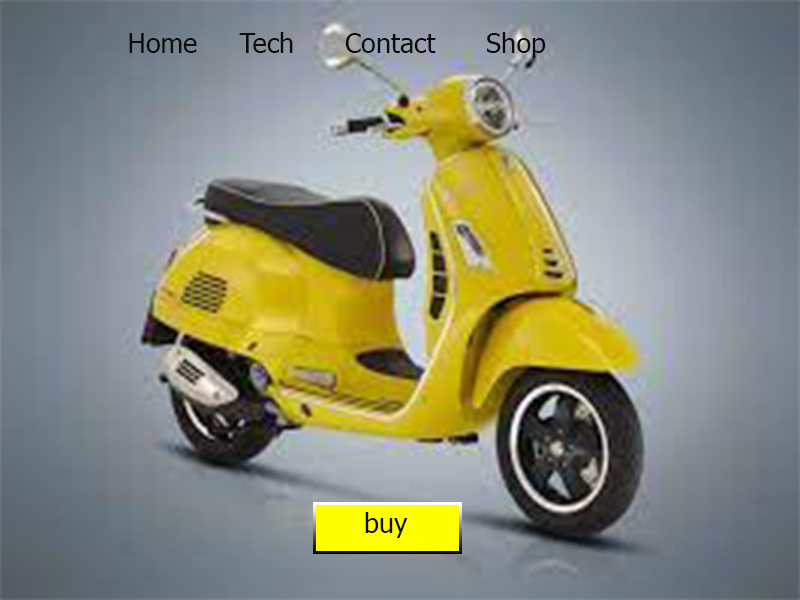
<style>
.page{position:relative;width:800px;height:600px}
.page>*{position:absolute;margin:0}
.t1{font:27px "Tahoma";color:#0c0c0c}
</style>
<div class="page">
<p class="t1" style="left:129px;top:32px;width:417px;height:26px">Home     Tech      Contact      Shop</p>
<p class="t1" style="left:365px;top:512px;width:43px;height:26px">buy</p>
</div>
